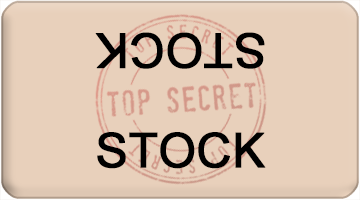
<style>
.page{position:relative;width:360px;height:200px;background:#e8d0bb}
.page>*{position:absolute;margin:0}
.t1{font:48px "ArialMT";color:#000000;font-weight:bold}
</style>
<div class="page">
<p class="t1" style="left:95px;top:32px;width:170px;height:37px;rotate:180deg">STOCK</p>
<p class="t1" style="left:97px;top:132px;width:169px;height:37px">STOCK</p>
</div>
